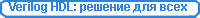
<style>
.page{position:relative;width:200px;height:18px;background:#2f83d9}
.page>*{position:absolute;margin:0}
.t1{font:12px "Arial-BoldMT";color:#2f83d9}
</style>
<div class="page">
<p class="t1" style="left:8px;top:2px;width:179px;height:11px">Verilog HDL: решение для всех</p>
</div>
